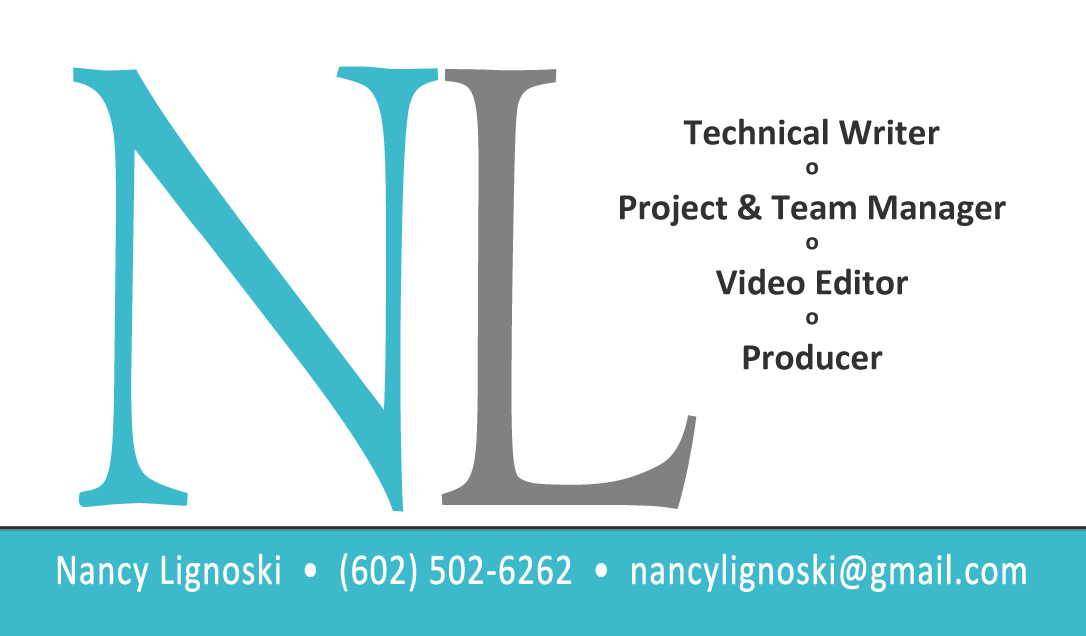
<style>
.page{position:relative;width:1086px;height:636px;background:#ffffff}
.page>*{position:absolute;margin:0}
.t1{font:687.5px "Centaur";color:#3cb9cb;scale:0.72 1}
.t2{font:694.4px "Centaur";color:#818181;scale:0.72 1}
.t3{font:37.5px "Calibri-Bold";color:#313131}
.t4{font:25px "Calibri-Bold";color:#313131}
.t5{font:43.8px "Calibri";letter-spacing:0.01em;color:#ffffff;font-weight:bold;scale:0.8 1}
</style>
<div class="page">
<p class="t1" style="left:73px;top:66px;width:366px;height:446px">N</p>
<p class="t2" style="left:441px;top:69px;width:256px;height:440px">L</p>
<p class="t3" style="left:620px;top:118px;width:386px;height:252px;text-align:center">Technical Writer<br><span class="t4">o<br></span>Project &amp; Team Manager<br><span class="t4">o<br></span>Video Editor<br><span class="t4">o<br></span>Producer</p>
<p class="t5" style="left:57px;top:553px;width:969px;height:39px">Nancy Lignoski  •  (602) 502-6262  •  nancylignoski@gmail.com</p>
</div>
